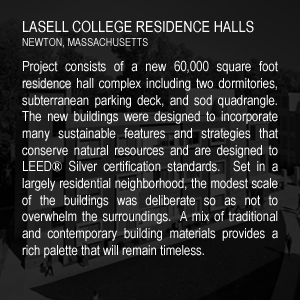
<style>
.page{position:relative;width:300px;height:300px}
.page>*{position:absolute;margin:0}
.t1{font:15.6px "ArialNarrow";color:#ffffff}
.t2{font:11.1px "ArialNarrow"}
.t3{font:13.9px "ArialNarrow";color:#ffffff}
.t4{font:13.9px "TimesNewRomanPSMT";color:#ffffff}
</style>
<div class="page">
<p class="t1" style="left:23px;top:20px;width:231px;height:13px">LASELL COLLEGE RESIDENCE HALLS</p>
<p class="t2" style="left:22px;top:38px;width:126px;height:10px">NEWTON, MASSACHUSETTS</p>
<p class="t3" style="left:22px;top:60px;width:256px;height:198px;text-align:justify">Project consists of a new 60,000 square foot residence hall complex including two dormitories, subterranean parking deck, and sod quadrangle.   The new buildings were designed to incorporate many sustainable features and strategies that conserve natural resources and are designed to LEED<span class="t4">®</span> Silver certification standards.  Set in a largely residential neighborhood, the modest scale of the buildings was deliberate so as not to overwhelm the surroundings.  A mix of traditional and contemporary building materials provides a rich palette that will remain timeless.</p>
</div>
